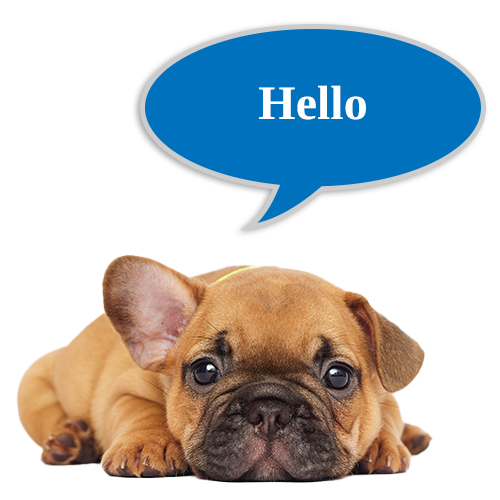
<style>
.page{position:relative;width:500px;height:500px;background:#ffffff}
.page>*{position:absolute;margin:0}
.t1{font:48px "LiberationSerif-Bold";color:#ffffff}
</style>
<div class="page">
<p class="t1" style="left:259px;top:85px;width:107px;height:35px">Hello</p>
</div>
